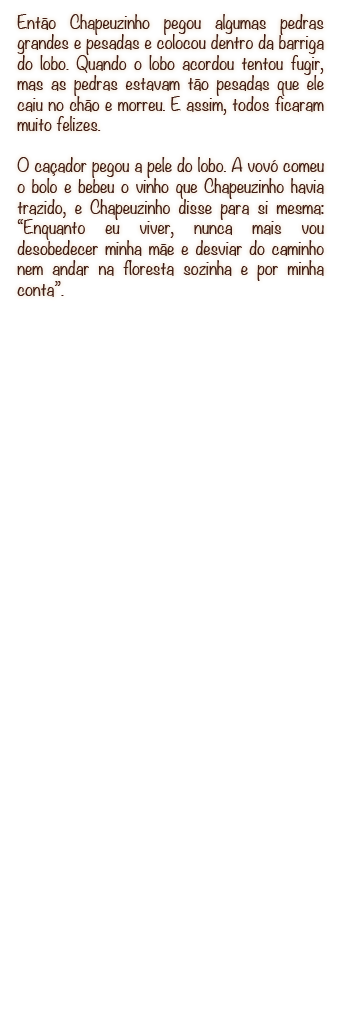
<style>
.page{position:relative;width:340px;height:1024px;background:#ffffff}
.page>*{position:absolute;margin:0}
.t1{font:17.1px "Noteworthy-Light";color:#411d14}
</style>
<div class="page">
<p class="t1" style="left:17px;top:14px;width:307px;height:283px;text-align:justify">Então Chapeuzinho pegou algumas pedras grandes e pesadas e colocou dentro da barriga do lobo. Quando o lobo acordou tentou fugir, mas as pedras estavam tão pesadas que ele caiu no chão e morreu. E assim, todos ficaram muito felizes.<br><br>O caçador pegou a pele do lobo. A vovó comeu o bolo e bebeu o vinho que Chapeuzinho havia trazido, e Chapeuzinho disse para si mesma: “Enquanto eu viver, nunca mais vou desobedecer minha mãe e desviar do caminho nem andar na floresta sozinha e por minha conta”.</p>
</div>
